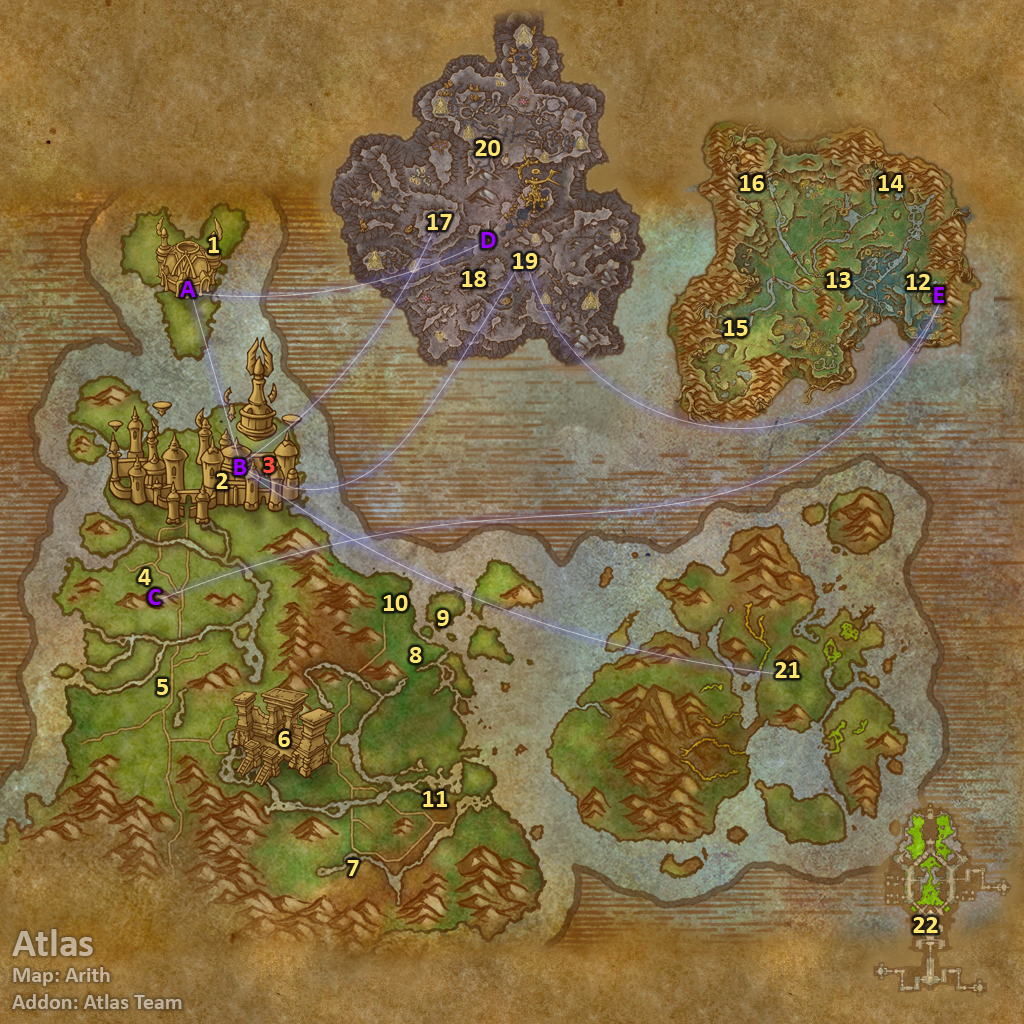
<style>
.page{position:relative;width:1024px;height:1024px}
.page>*{position:absolute;margin:0}
.t1{font:26px "Calibri-Bold";color:#fee570}
.t2{font:26px "Calibri-Bold";color:#9900ff}
.t3{font:26px "Calibri-Bold";color:#ff4c3c}
.t4{font:22px "Calibri-Bold";color:#c3b19a}
.t5{font:40px "Calibri-Bold";color:#c3b19a}
</style>
<div class="page">
<p class="t1" style="left:475px;top:140px;width:25px;height:16px">20</p>
<p class="t1" style="left:740px;top:175px;width:24px;height:16px">16</p>
<p class="t1" style="left:878px;top:175px;width:26px;height:16px">14</p>
<p class="t1" style="left:427px;top:214px;width:25px;height:16px">17</p>
<p class="t2" style="left:481px;top:232px;width:15px;height:16px">D</p>
<p class="t1" style="left:208px;top:237px;width:11px;height:16px">1</p>
<p class="t1" style="left:513px;top:253px;width:25px;height:16px">19</p>
<p class="t2" style="left:180px;top:281px;width:16px;height:16px">A</p>
<p class="t1" style="left:462px;top:271px;width:24px;height:16px">18</p>
<p class="t1" style="left:826px;top:272px;width:25px;height:16px">13</p>
<p class="t1" style="left:906px;top:274px;width:25px;height:16px">12</p>
<p class="t2" style="left:934px;top:287px;width:10px;height:16px">E</p>
<p class="t1" style="left:724px;top:320px;width:24px;height:16px">15</p>
<p class="t2" style="left:234px;top:459px;width:13px;height:16px">B</p>
<p class="t3" style="left:263px;top:457px;width:12px;height:16px">3</p>
<p class="t1" style="left:216px;top:473px;width:12px;height:16px">2</p>
<p class="t1" style="left:138px;top:569px;width:13px;height:16px">4</p>
<p class="t2" style="left:148px;top:589px;width:13px;height:16px">C</p>
<p class="t1" style="left:383px;top:595px;width:25px;height:16px">10</p>
<p class="t1" style="left:437px;top:610px;width:12px;height:16px">9</p>
<p class="t1" style="left:409px;top:647px;width:13px;height:16px">8</p>
<p class="t1" style="left:775px;top:662px;width:25px;height:16px">21</p>
<p class="t1" style="left:157px;top:679px;width:11px;height:16px">5</p>
<p class="t1" style="left:278px;top:731px;width:12px;height:16px">6</p>
<p class="t1" style="left:423px;top:791px;width:24px;height:16px">11</p>
<p class="t1" style="left:347px;top:860px;width:12px;height:16px">7</p>
<p class="t1" style="left:913px;top:917px;width:25px;height:16px">22</p>
<p class="t4" style="left:12px;top:929px;width:170px;height:80px"><span class="t5">Atlas<br></span>Map: Arith<br>Addon: Atlas Team</p>
</div>
